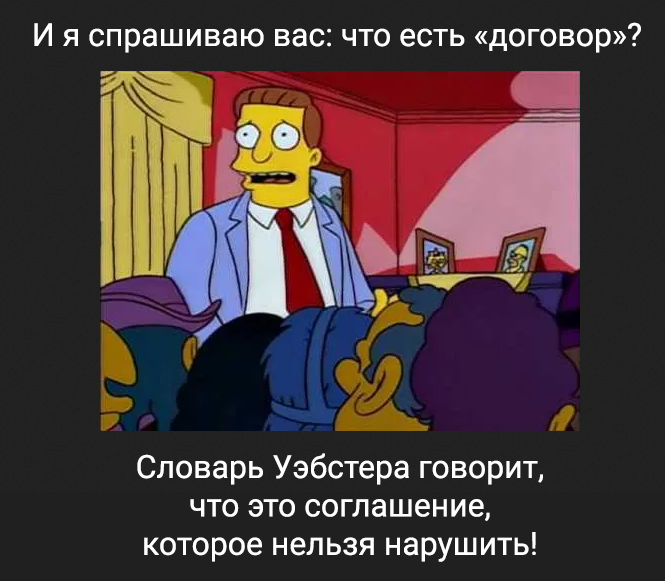
<style>
.page{position:relative;width:665px;height:581px}
.page>*{position:absolute;margin:0}
.t1{font:32px "Roboto-Regular";color:#ffffff}
</style>
<div class="page">
<p class="t1" style="left:34px;top:22px;width:607px;height:31px">И я спрашиваю вас: что есть «договор»?</p>
<p class="t1" style="left:137px;top:453px;width:406px;height:109px;text-align:center">Словарь Уэбстера говорит,<br>что это соглашение,<br>которое нельзя нарушить!</p>
</div>
